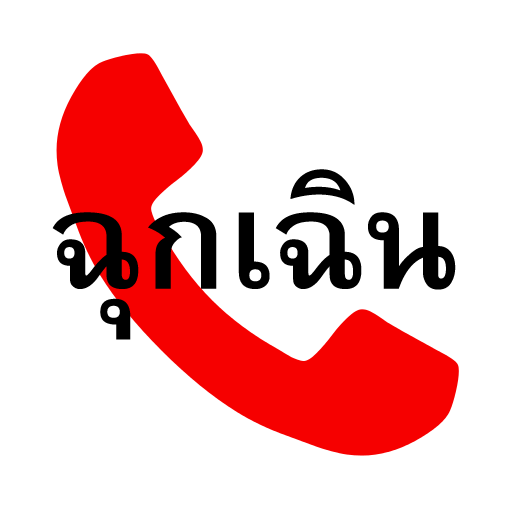
<style>
.page{position:relative;width:512px;height:512px;background:#ffffff}
.page>*{position:absolute;margin:0}
.t1{font:190px "BrowalliaNew-Bold";color:#000000}
</style>
<div class="page">
<p class="t1" style="left:52px;top:169px;width:404px;height:171px">ฉุกเฉิน</p>
</div>
